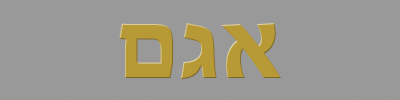
<style>
.page{position:relative;width:400px;height:100px;background:#999999}
.page>*{position:absolute;margin:0}
.t1{font:100px "MyriadHebrew-Bold";color:#b79a36}
</style>
<div class="page">
<p class="t1" style="left:119px;top:23px;width:162px;height:56px">אגם</p>
</div>
